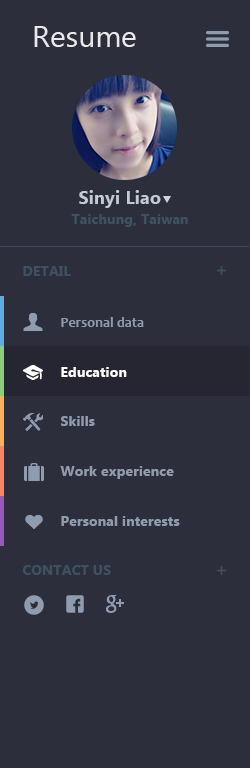
<style>
.page{position:relative;width:250px;height:768px;background:#2c2e3b}
.page>*{position:absolute;margin:0}
.t1{font:30px "SegoeUI";color:#e9eaeb}
.t2{font:18px "SegoeUI-Bold";letter-spacing:0.01em;color:#c0ccd5}
.t3{font:14px "Candara-Bold";letter-spacing:0.01em;color:#909caf}
.t4{font:14px "SegoeUI-Bold";letter-spacing:0.01em;color:#ffffff}
.t5{font:14px "SegoeUI-Bold";letter-spacing:0.01em;color:#909caf}
</style>
<div class="page">
<p class="t1" style="left:34px;top:26px;width:102px;height:21px">Resume</p>
<p class="t2" style="left:79px;top:190px;width:82px;height:18px">Sinyi Liao</p>
<p class="t3" style="left:61px;top:317px;width:83px;height:10px">Personal data</p>
<p class="t4" style="left:61px;top:367px;width:66px;height:10px">Education</p>
<p class="t5" style="left:61px;top:416px;width:34px;height:10px">Skills</p>
<p class="t5" style="left:60px;top:466px;width:114px;height:13px">Work experience</p>
<p class="t5" style="left:61px;top:516px;width:119px;height:10px">Personal interests</p>
</div>
